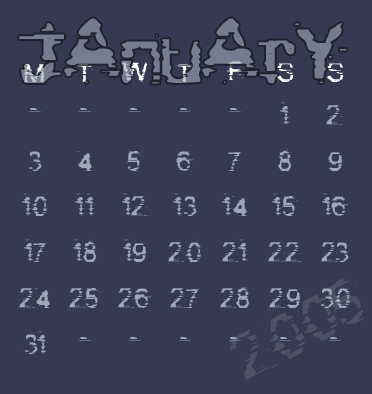
<style>
.page{position:relative;width:372px;height:394px;background:#373952}
.page>*{position:absolute;margin:0}
.t1{font:121.3px "BadCargo2.0";color:#767b90}
.t2{font:38.1px "BadCargo2.0"}
.t3{font:38.1px "BadCargo2.0";color:#ffffff}
.t4{font:38.1px "BadCargo2.0";color:#a0a7b9}
.t5{font:14px "AstigmaSolid";color:#a0a7b9}
.t6{font:85.9px "BadCargo2.0";color:#4e5064}
</style>
<div class="page">
<p class="t1" style="left:19px;top:18px;width:328px;height:66px">JAnuArY</p>
<p class="t2" style="left:24px;top:64px;width:21px;height:18px">M</p>
<p class="t3" style="left:77px;top:64px;width:16px;height:18px">T</p>
<p class="t3" style="left:122px;top:62px;width:25px;height:20px">W</p>
<p class="t3" style="left:177px;top:64px;width:16px;height:18px">T</p>
<p class="t3" style="left:227px;top:61px;width:16px;height:22px">F</p>
<p class="t3" style="left:277px;top:63px;width:16px;height:19px">S</p>
<p class="t3" style="left:327px;top:63px;width:16px;height:19px">S</p>
<p class="t4" style="left:268px;top:102px;width:34px;height:239px;text-align:center"><span class="t5"><br></span>1<br>8<br>15<br>22<br>29<br>-</p>
<p class="t4" style="left:19px;top:108px;width:31px;height:246px;text-align:center"><span class="t5"><br></span>-<br>3<br>10<br>17<br>24<br>31</p>
<p class="t4" style="left:69px;top:108px;width:32px;height:233px;text-align:center"><span class="t5"><br></span>-<br>4<br>11<br>18<br>25<br>-</p>
<p class="t4" style="left:118px;top:108px;width:33px;height:233px;text-align:center"><span class="t5"><br></span>-<br>5<br>12<br>19<br>26<br>-</p>
<p class="t4" style="left:168px;top:108px;width:33px;height:233px;text-align:center"><span class="t5"><br></span>-<br>6<br>13<br>20<br>27<br>-</p>
<p class="t4" style="left:220px;top:108px;width:30px;height:233px;text-align:center"><span class="t5"><br></span>-<br>7<br>14<br>21<br>28<br>-</p>
<p class="t4" style="left:319px;top:105px;width:31px;height:236px;text-align:center"><span class="t5"><br></span>2<br>9<br>16<br>23<br>30<br>-</p>
<p class="t6" style="left:229px;top:278px;width:136px;height:103px;rotate:-28deg">2005</p>
</div>
